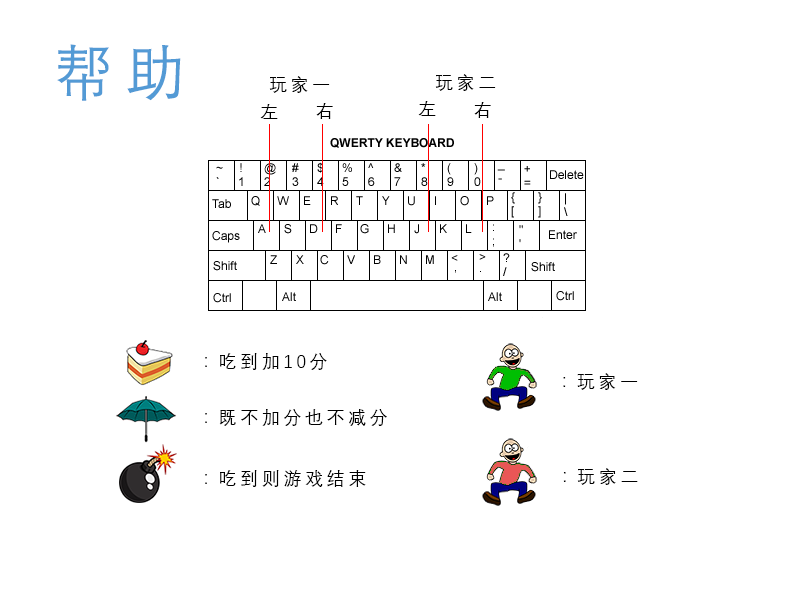
<style>
.page{position:relative;width:800px;height:600px;background:#ffffff}
.page>*{position:absolute;margin:0}
.t1{font:60px "DengXian-Regular";letter-spacing:0.2em;color:#539ad5}
.t2{font:18px "DengXian-Regular";letter-spacing:0.2em;color:#000000}
</style>
<div class="page">
<p class="t1" style="left:57px;top:44px;width:124px;height:57px">帮助</p>
<p class="t2" style="left:269px;top:76px;width:61px;height:17px">玩家一</p>
<p class="t2" style="left:435px;top:74px;width:61px;height:17px">玩家二</p>
<p class="t2" style="left:418px;top:101px;width:18px;height:15px">左</p>
<p class="t2" style="left:474px;top:102px;width:17px;height:16px">右</p>
<p class="t2" style="left:260px;top:104px;width:18px;height:15px">左</p>
<p class="t2" style="left:316px;top:103px;width:17px;height:16px">右</p>
<p class="t2" style="left:205px;top:353px;width:122px;height:17px">：吃到加10分</p>
<p class="t2" style="left:563px;top:373px;width:75px;height:17px">：玩家一</p>
<p class="t2" style="left:205px;top:409px;width:182px;height:17px">：既不加分也不减分</p>
<p class="t2" style="left:205px;top:470px;width:161px;height:17px">：吃到则游戏结束</p>
<p class="t2" style="left:563px;top:468px;width:75px;height:17px">：玩家二</p>
</div>
